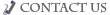
<style>
.page{position:relative;width:110px;height:15px;background:#ffffff}
.page>*{position:absolute;margin:0}
.t1{font:12px "CharlemagneStd-Bold";color:#666666}
</style>
<div class="page">
<p class="t1" style="left:20px;top:2px;width:87px;height:11px">Contact Us</p>
</div>
